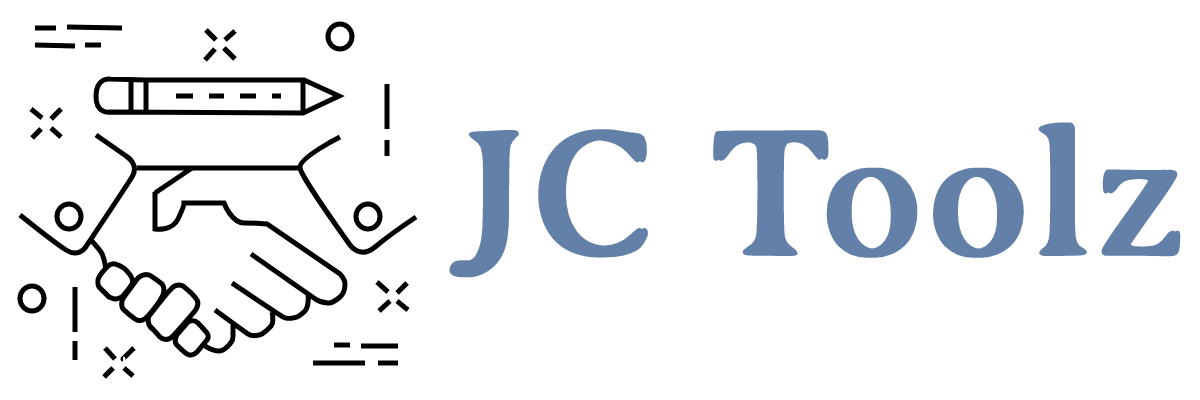
<style>
.page{position:relative;width:1200px;height:400px;background:#ffffff}
.page>*{position:absolute;margin:0}
.t1{font:185px "AveriaSerifLibre-Regular";color:#6381a8;font-weight:bold}
</style>
<div class="page">
<p class="t1" style="left:449px;top:122px;width:732px;height:156px">JC Toolz</p>
</div>
